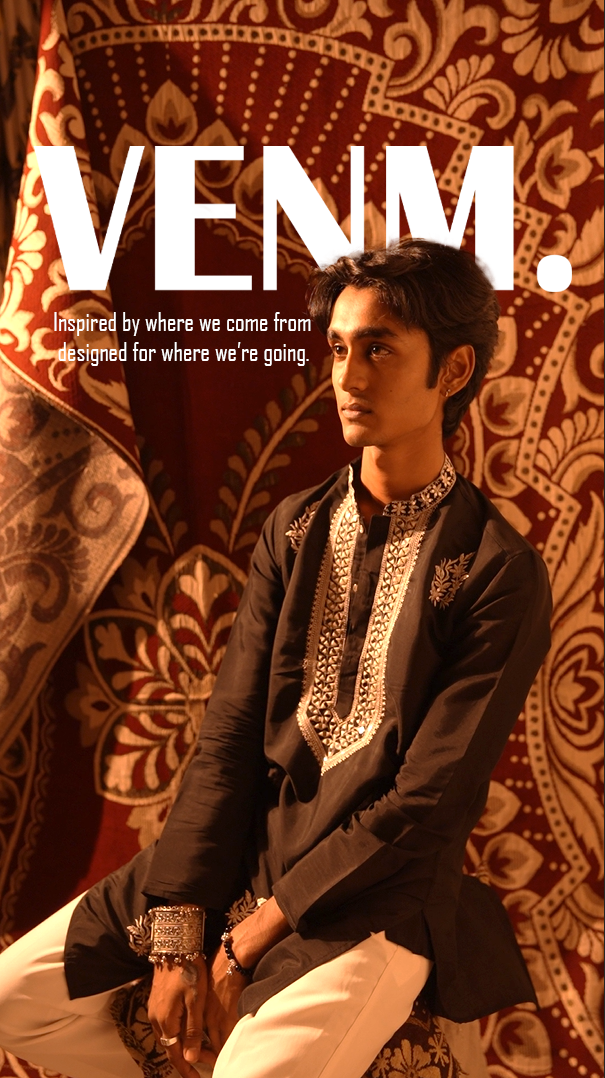
<style>
.page{position:relative;width:605px;height:1078px}
.page>*{position:absolute;margin:0}
.t1{font:25px "AgencyFB-Reg";color:#ffffff}
</style>
<div class="page">
<p class="t1" style="left:54px;top:312px;width:257px;height:54px">Inspired by where we come from<br> designed for where we’re going.</p>
</div>
